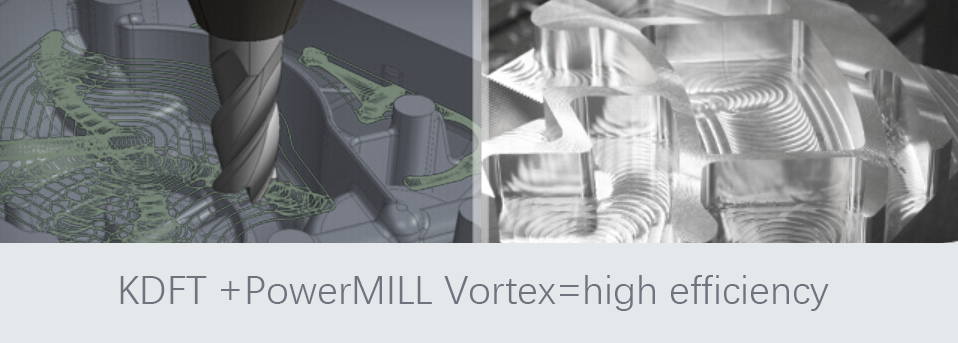
<style>
.page{position:relative;width:958px;height:343px;background:#e4e8eb}
.page>*{position:absolute;margin:0}
.t1{font:40px "DengXian";color:#6f737d}
</style>
<div class="page">
<p class="t1" style="left:120px;top:275px;width:709px;height:36px">KDFT +PowerMILL Vortex=high efficiency</p>
</div>
